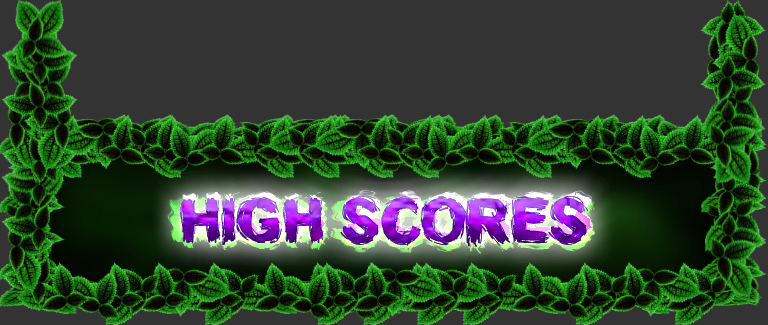
<style>
.page{position:relative;width:768px;height:325px;background:#333333}
.page>*{position:absolute;margin:0}
.t1{font:60px "SplinterWood";text-transform:uppercase}
</style>
<div class="page">
<p class="t1" style="left:180px;top:195px;width:408px;height:52px">HIGH SCORES</p>
<p class="t1" style="left:180px;top:195px;width:408px;height:52px">HIGH SCORES</p>
<p class="t1" style="left:180px;top:195px;width:408px;height:52px">HIGH SCORES</p>
</div>
